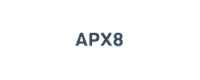
<style>
.page{position:relative;width:200px;height:80px;background:#ffffff}
.page>*{position:absolute;margin:0}
.t1{font:17px "Jalnan"}
</style>
<div class="page">
<p class="t1" style="left:74px;top:31px;width:51px;height:17px">APX8</p>
</div>
